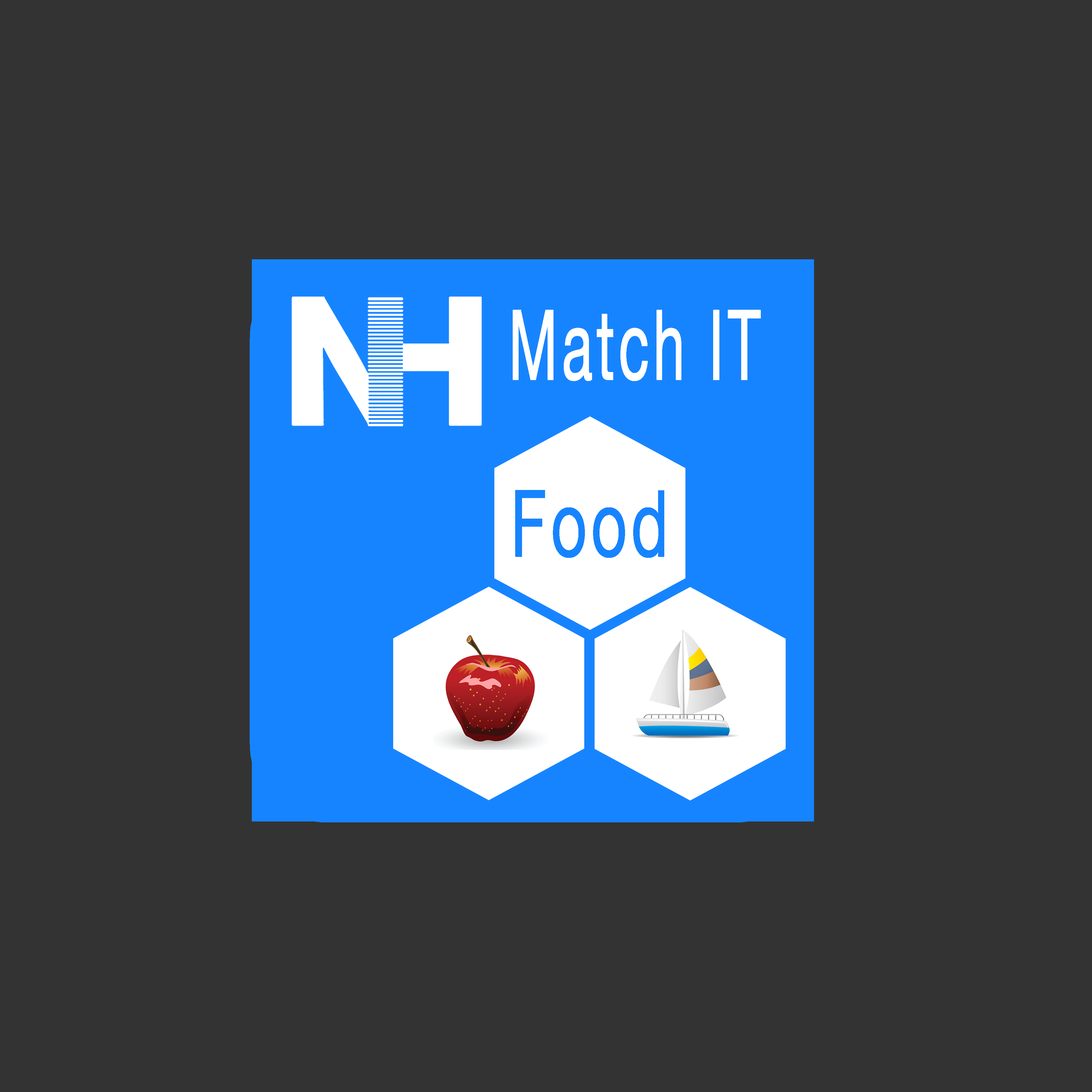
<style>
.page{position:relative;width:1092px;height:1092px;background:#333333}
.page>*{position:absolute;margin:0}
.t1{font:97.2px "HelveticaNeue";letter-spacing:0.05em;color:#ffffff;font-weight:bold;scale:0.58 1}
.t2{font:92.6px "HelveticaNeue";letter-spacing:0.05em;color:#1784ff;font-weight:bold;scale:0.67 1}
</style>
<div class="page">
<p class="t1" style="left:513px;top:310px;width:248px;height:71px">Match IT</p>
<p class="t2" style="left:515px;top:490px;width:149px;height:68px">Food</p>
</div>
